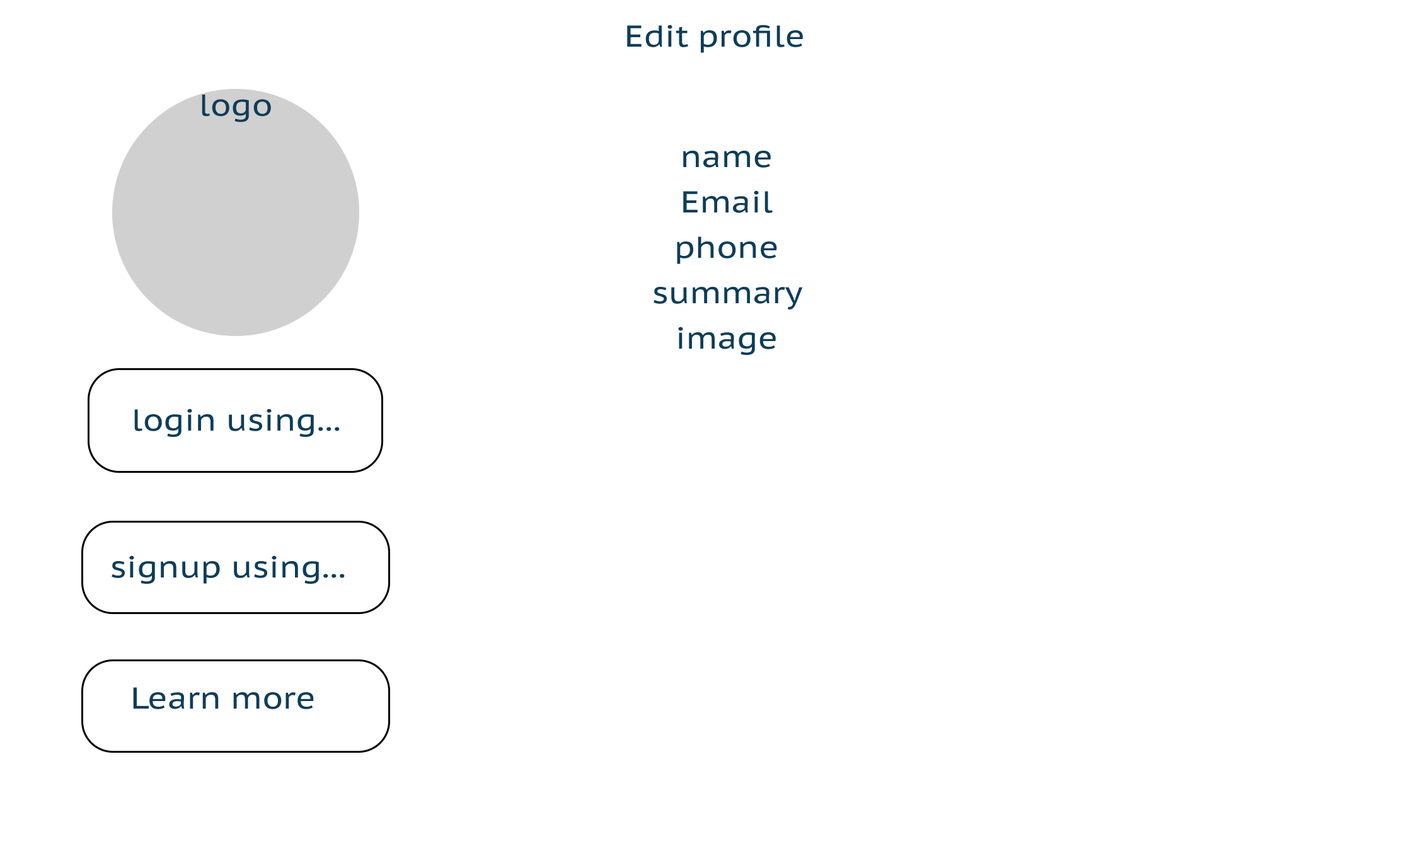
<style>
.page{position:relative;width:1418px;height:841px;background:#ffffff}
.page>*{position:absolute;margin:0}
.t1{font:30.3px "PTSans-Caption";color:#0e3d59;scale:1.1 1}
.t2{font:30.3px/45.4px "PTSans-Caption";color:#0e3d59;scale:1.1 1}
</style>
<div class="page">
<p class="t1" style="left:627px;top:25px;width:176px;height:28px">Edit profile</p>
<p class="t1" style="left:202px;top:95px;width:69px;height:27px">logo</p>
<p class="t2" style="left:654px;top:151px;width:149px;height:204px;text-align:center">name<br>Email<br>phone<br>summary<br>image</p>
<p class="t1" style="left:134px;top:408px;width:206px;height:29px">login using...</p>
<p class="t1" style="left:112px;top:555px;width:233px;height:29px">signup using...</p>
<p class="t1" style="left:133px;top:687px;width:181px;height:22px">Learn more</p>
</div>
